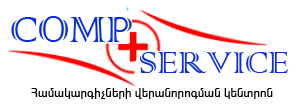
<style>
.page{position:relative;width:300px;height:105px;background:#ffffff}
.page>*{position:absolute;margin:0}
.t1{font:48px "Armcolonna";color:#052de3}
.t2{font:40px "Armcolonna";color:#052de3}
.t3{font:12px "ArialArmenianMT";color:#000000}
</style>
<div class="page">
<p class="t1" style="left:11px;top:16px;width:121px;height:27px">COMP</p>
<p class="t2" style="left:139px;top:52px;width:150px;height:21px">SERVICE</p>
<p class="t3" style="left:31px;top:88px;width:242px;height:11px">Ð³Ù³Ï³ñ·ÇãÝ»ñÇ í»ñ³Ýáñá·Ù³Ý Ï»ÝïñáÝ</p>
</div>
